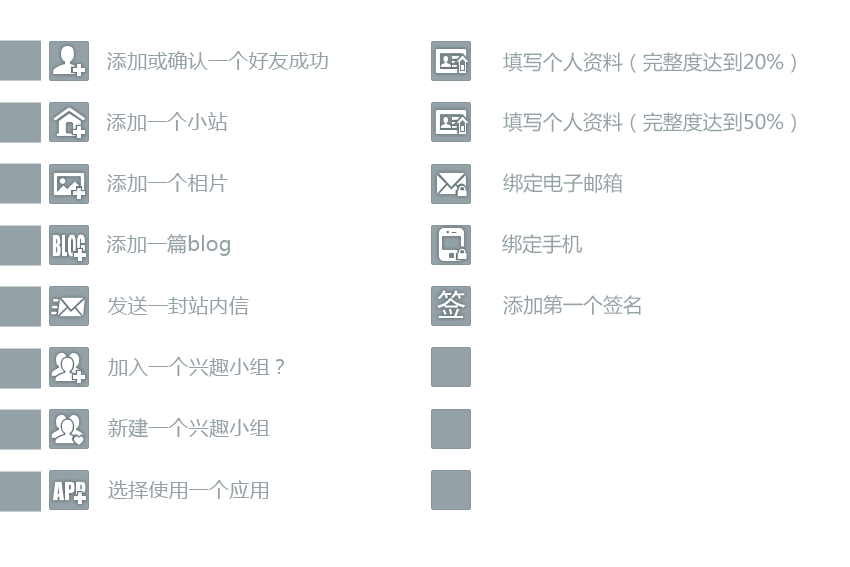
<style>
.page{position:relative;width:850px;height:567px;background:#ffffff}
.page>*{position:absolute;margin:0}
.t1{font:20px "MicrosoftYaHei";letter-spacing:0.01em;color:#94a1a6}
.t2{font:20px "MicrosoftYaHei";color:#94a1a6}
</style>
<div class="page">
<p class="t1" style="left:107px;top:51px;width:221px;height:19px">添加或确认一个好友成功</p>
<p class="t2" style="left:503px;top:52px;width:293px;height:21px">填写个人资料（完整度达到20%）</p>
<p class="t1" style="left:106px;top:112px;width:122px;height:19px">添加一个小站</p>
<p class="t2" style="left:503px;top:112px;width:293px;height:21px">填写个人资料（完整度达到50%）</p>
<p class="t1" style="left:107px;top:173px;width:121px;height:19px">添加一个相片</p>
<p class="t2" style="left:503px;top:173px;width:120px;height:20px">绑定电子邮箱</p>
<p class="t1" style="left:106px;top:234px;width:124px;height:22px">添加一篇blog</p>
<p class="t2" style="left:502px;top:234px;width:80px;height:20px">绑定手机</p>
<p class="t1" style="left:107px;top:296px;width:142px;height:19px">发送一封站内信</p>
<p class="t2" style="left:503px;top:295px;width:138px;height:20px">添加第一个签名</p>
<p class="t1" style="left:108px;top:357px;width:176px;height:20px">加入一个兴趣小组？</p>
<p class="t1" style="left:108px;top:418px;width:162px;height:20px">新建一个兴趣小组</p>
<p class="t1" style="left:108px;top:480px;width:161px;height:19px">选择使用一个应用</p>
</div>
